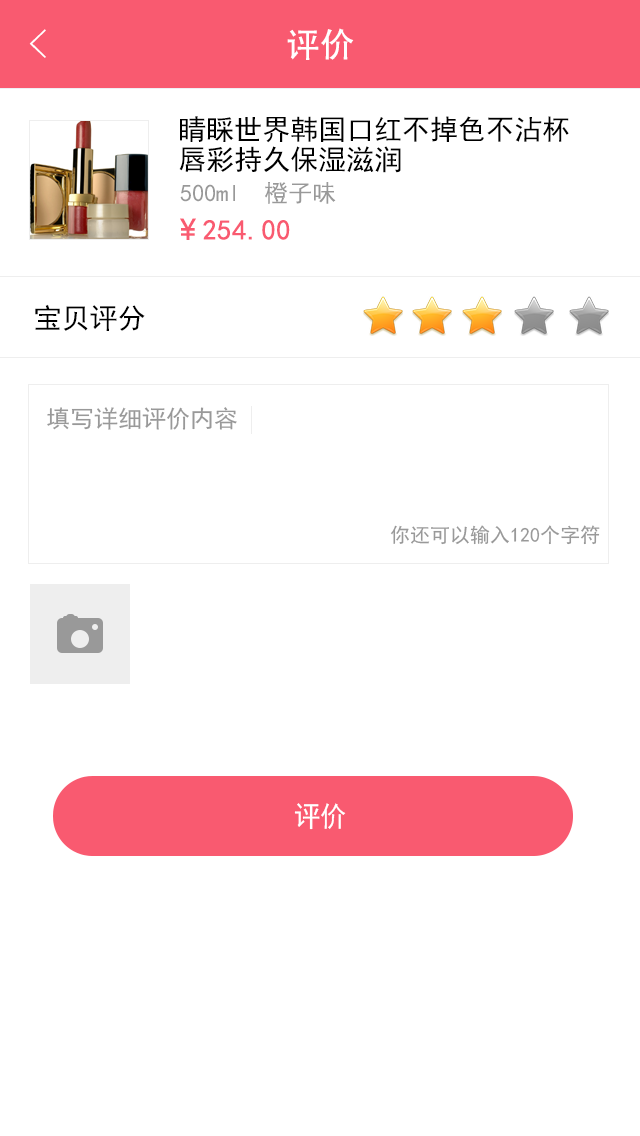
<style>
.page{position:relative;width:640px;height:1136px;background:#ffffff}
.page>*{position:absolute;margin:0}
.t1{font:40px "FZYXJW--GB1-0";color:#ffffff}
.t2{font:34px "AdobeHeitiStd-Regular";color:#ffffff}
.t3{font:28px/30px "SimHei";color:#000000}
.t4{font:24px "SimHei";color:#999999}
.t5{font:28px "SimHei";color:#f95a70;font-weight:bold}
.t6{font:28px "MicrosoftYaHei";color:#f95a70;font-weight:bold}
.t7{font:28px "SimHei";color:#000000}
.t8{font:20px "SimHei";color:#999999}
.t9{font:28px "SimHei";color:#ffffff;scale:0.94 1}
</style>
<div class="page">
<p class="t1" style="left:29px;top:29px;width:17px;height:29px">&lt;</p>
<p class="t2" style="left:287px;top:28px;width:67px;height:32px">评价</p>
<p class="t3" style="left:179px;top:116px;width:390px;height:57px">睛睬世界韩国口红不掉色不沾杯<br>唇彩持久保湿滋润</p>
<p class="t4" style="left:180px;top:182px;width:156px;height:22px">500ml  橙子味</p>
<p class="t5" style="left:180px;top:218px;width:110px;height:22px"><span class="t6">￥</span>254.00</p>
<p class="t7" style="left:35px;top:304px;width:110px;height:27px">宝贝评分</p>
<p class="t4" style="left:47px;top:407px;width:190px;height:23px">填写详细评价内容</p>
<p class="t8" style="left:390px;top:525px;width:210px;height:20px">你还可以输入120个字符</p>
<p class="t9" style="left:294px;top:803px;width:52px;height:27px">评价</p>
</div>
